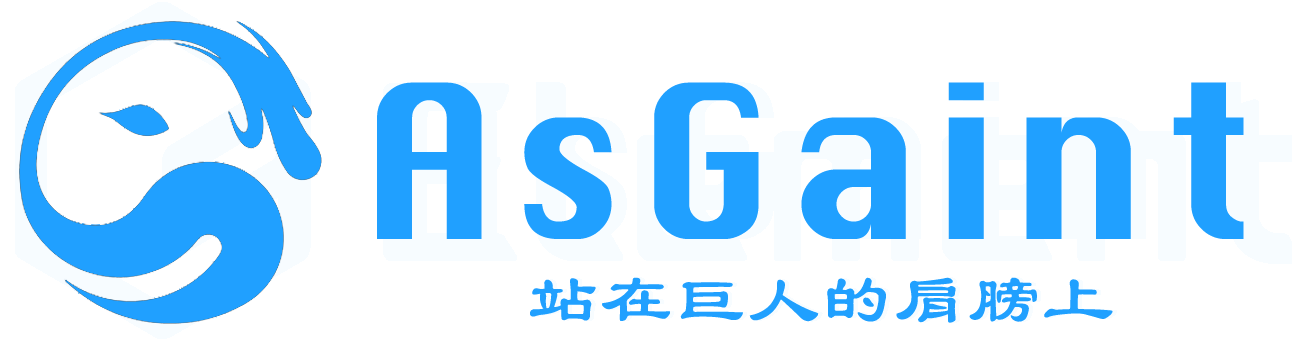
<style>
.page{position:relative;width:1292px;height:341px;background:#ffffff}
.page>*{position:absolute;margin:0}
.t1{font:208.3px "Silom";letter-spacing:0.04em;color:#20a0ff}
.t2{font:70.8px "STBaoliTC-Regular";letter-spacing:0.04em;color:#20a0ff}
</style>
<div class="page">
<p class="t1" style="left:377px;top:82px;width:867px;height:157px">AsGaint</p>
<p class="t2" style="left:530px;top:277px;width:583px;height:46px">站在巨人的肩膀上</p>
</div>
